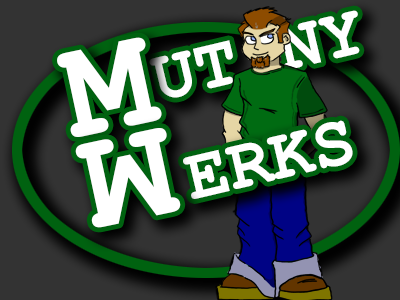
<style>
.page{position:relative;width:400px;height:300px;background:#333333}
.page>*{position:absolute;margin:0}
.t1{font:72px "CourierNewPS-BoldMT";color:#ffffff}
.t2{font:144px "CourierNewPS-BoldMT";color:#ffffff}
</style>
<div class="page">
<p class="t1" style="left:149px;top:10px;width:211px;height:88px;rotate:-13deg">UT NY</p>
<p class="t2" style="left:57px;top:37px;width:105px;height:100px;rotate:-12deg">M</p>
<p class="t1" style="left:183px;top:120px;width:170px;height:79px;rotate:-13deg">ERKS</p>
<p class="t2" style="left:75px;top:128px;width:106px;height:100px;rotate:168deg">M</p>
</div>
